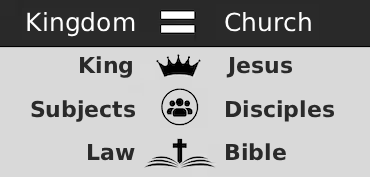
<style>
.page{position:relative;width:370px;height:177px;background:#d9d9d9}
.page>*{position:absolute;margin:0}
.t1{font:25px "DejaVuSans";color:#fefefe}
.t2{font:22px "DejaVuSans-Bold";color:#2a2a2a}
</style>
<div class="page">
<p class="t1" style="left:27px;top:12px;width:108px;height:25px">Kingdom</p>
<p class="t1" style="left:225px;top:12px;width:86px;height:20px">Church</p>
<p class="t2" style="left:80px;top:56px;width:52px;height:22px">King</p>
<p class="t2" style="left:226px;top:56px;width:67px;height:22px">Jesus</p>
<p class="t2" style="left:31px;top:100px;width:105px;height:22px">Subjects</p>
<p class="t2" style="left:226px;top:100px;width:109px;height:22px">Disciples</p>
<p class="t2" style="left:88px;top:143px;width:47px;height:18px">Law</p>
<p class="t2" style="left:226px;top:143px;width:60px;height:18px">Bible</p>
</div>
